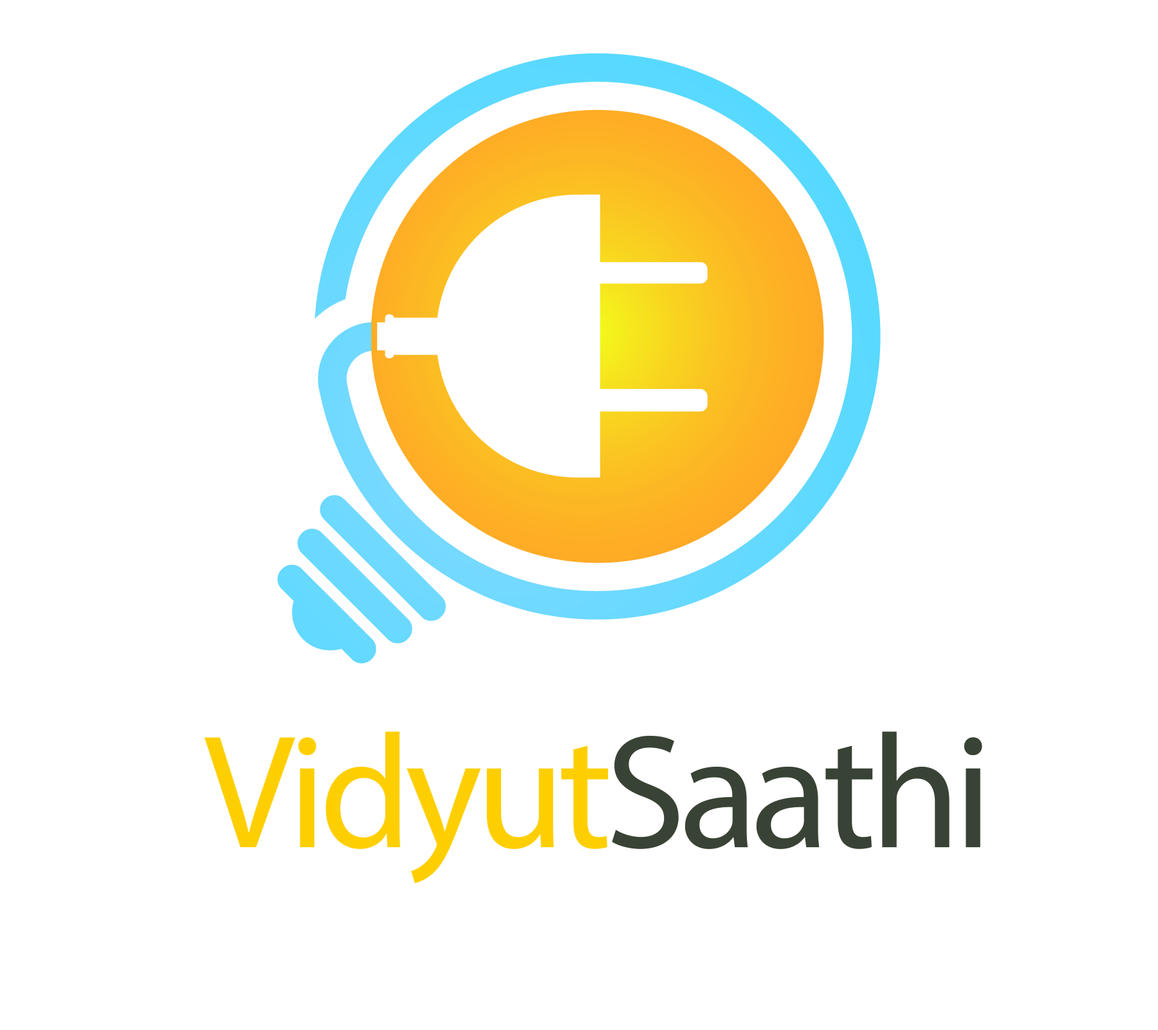
<style>
.page{position:relative;width:1158px;height:1030px;background:#ffffff}
.page>*{position:absolute;margin:0}
.t1{font:162.6px "MyriadConceptRoman-Regular";letter-spacing:-0.04em;color:#fecf00}
.t2{font:162.6px "MyriadConceptRoman-Regular";letter-spacing:-0.04em;color:#3a4335}
</style>
<div class="page">
<p class="t1" style="left:204px;top:731px;width:779px;height:152px">Vidyut<span class="t2">Saathi</span></p>
</div>
